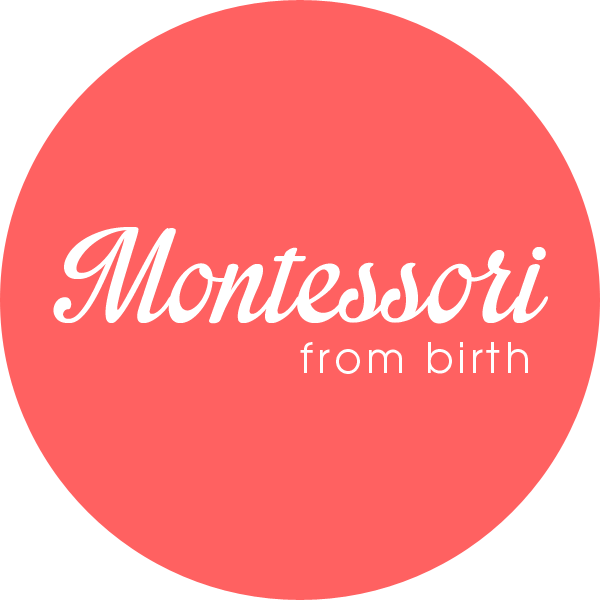
<style>
.page{position:relative;width:600px;height:600px;background:#ff6161}
.page>*{position:absolute;margin:0}
.t1{font:180.8px "ImpregnablePersonalUseOnly";letter-spacing:0.01em;color:#ffffff}
.t2{font:41.7px "AvantGarde-Book";letter-spacing:0.1em;color:#fefefe}
</style>
<div class="page">
<p class="t1" style="left:53px;top:227px;width:495px;height:97px">Montessori</p>
<p class="t2" style="left:300px;top:342px;width:228px;height:32px">from birth</p>
</div>
